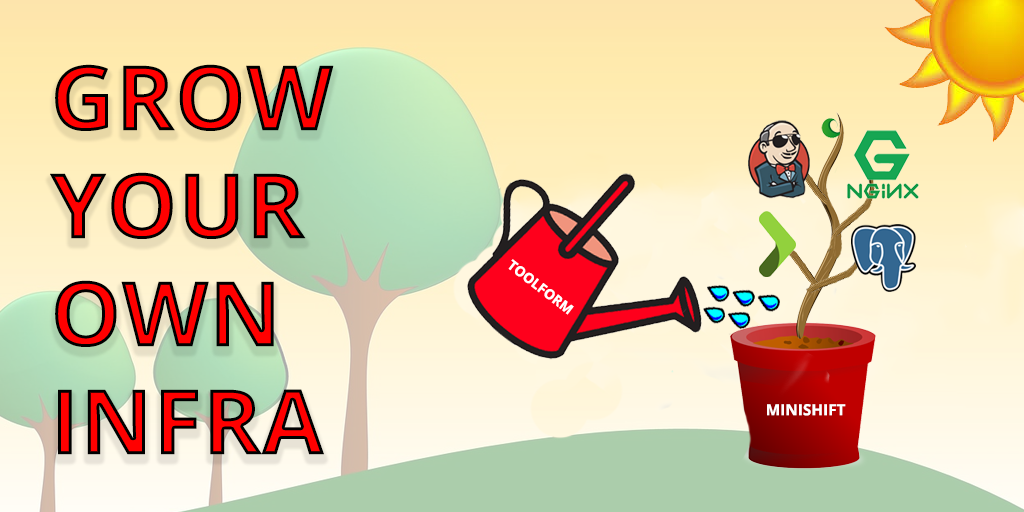
<style>
.page{position:relative;width:1024px;height:512px}
.page>*{position:absolute;margin:0}
.t1{font:90px "OpenSans-Bold";text-transform:uppercase}
.t2{font:13.8px "OpenSans-Bold";color:#ffffff;text-transform:uppercase}
.t3{font:15.4px "OpenSans-Bold";color:#ffffff;text-transform:uppercase}
</style>
<div class="page">
<p class="t1" style="left:50px;top:64px;width:284px;height:391px">Grow<br>your<br>own <br>infra</p>
<p class="t2" style="left:508px;top:259px;width:66px;height:56px;rotate:38deg">Toolform</p>
<p class="t3" style="left:767px;top:404px;width:79px;height:12px">MinISHIFT</p>
</div>
